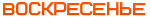
<style>
.page{position:relative;width:150px;height:17px;background:#ffffff}
.page>*{position:absolute;margin:0}
.t1{font:17.6px "Bicubik";letter-spacing:0.01em;color:#ff5200;text-transform:uppercase;font-weight:bold;scale:0.91 1}
</style>
<div class="page">
<p class="t1" style="left:3px;top:2px;width:142px;height:14px">воскресенье</p>
</div>
